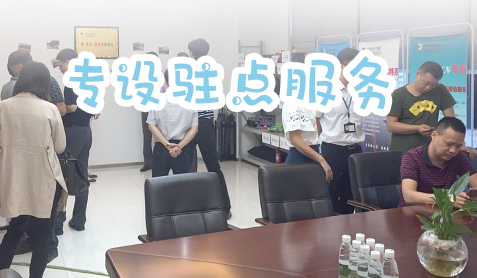
<style>
.page{position:relative;width:477px;height:278px}
.page>*{position:absolute;margin:0}
.t1{font:53.6px "ZXFChildhoodTrial-Regular";letter-spacing:0.18em;color:#87ceeb;text-transform:uppercase;scale:0.96 1}
</style>
<div class="page">
<p class="t1" style="left:69px;top:56px;width:321px;height:54px">专设驻点服务</p>
</div>
